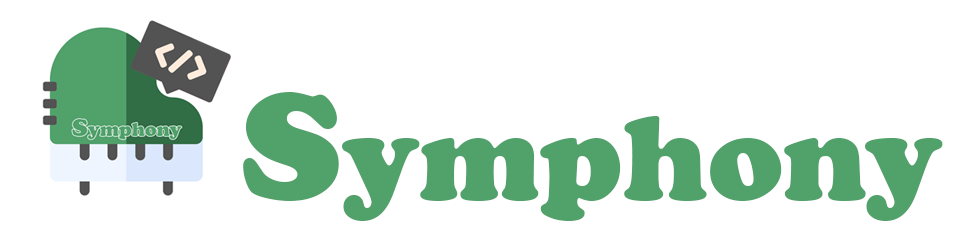
<style>
.page{position:relative;width:973px;height:239px;background:#ffffff}
.page>*{position:absolute;margin:0}
.t1{font:125px "CooperBlack";color:#51a16b}
.t2{font:158.3px "CooperBlack";color:#51a16b}
</style>
<div class="page">
<p class="t1" style="left:243px;top:92px;width:700px;height:129px"><span class="t2">S</span>ymphony</p>
</div>
